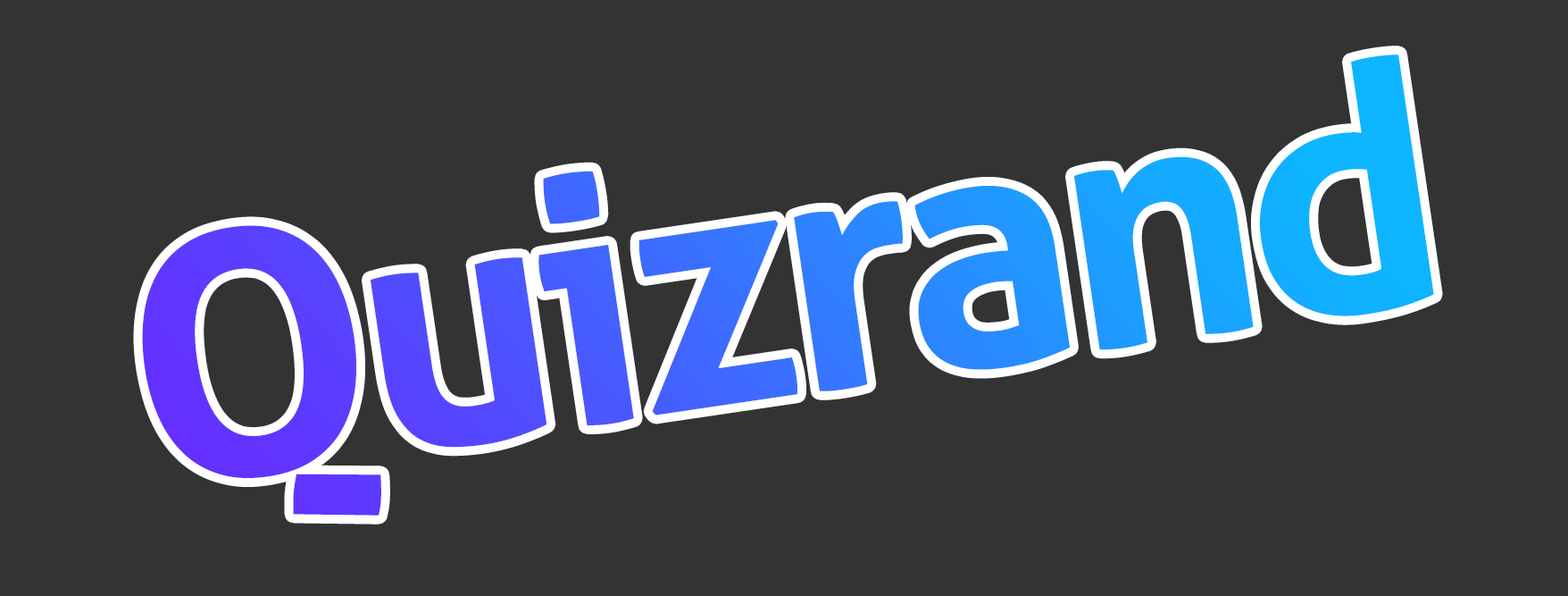
<style>
.page{position:relative;width:1568px;height:596px;background:#333333}
.page>*{position:absolute;margin:0}
.t1{font:338.7px "Aller-Bold";letter-spacing:-0.039em}
</style>
<div class="page">
<p class="t1" style="left:142px;top:54px;width:1292px;height:461px;rotate:-8deg">Quizrand</p>
</div>
